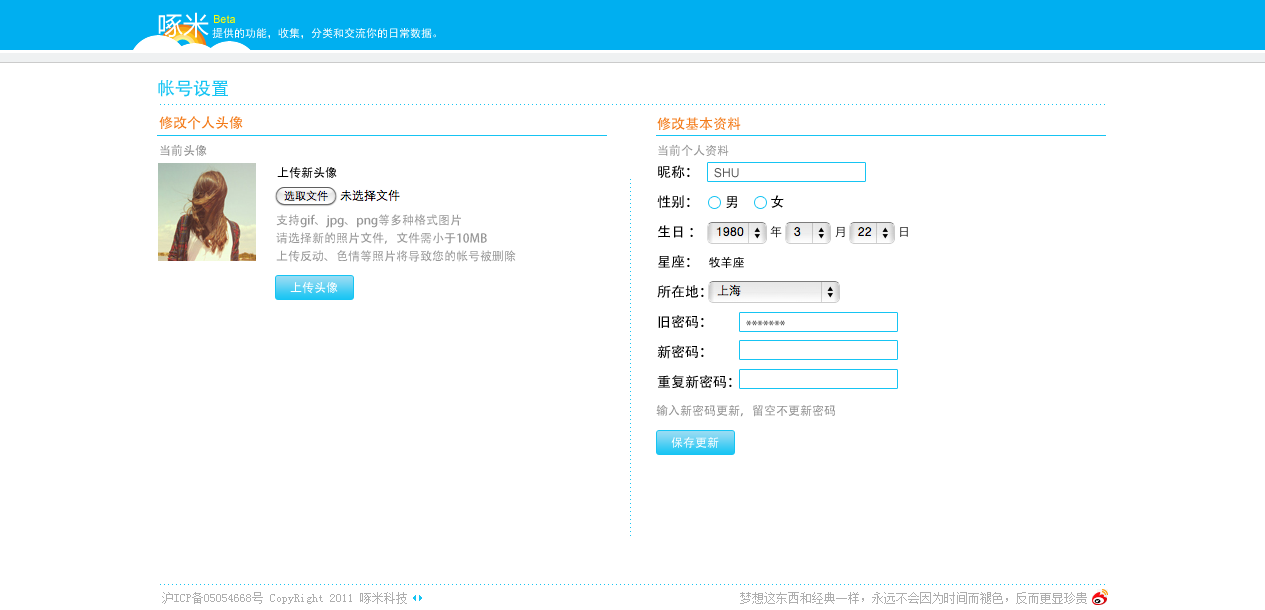
<style>
.page{position:relative;width:1265px;height:610px;background:#ffffff}
.page>*{position:absolute;margin:0}
.t1{font:26px "MicrosoftYaHei";color:#ffffff}
.t2{font:11px "ArialMT";color:#fffc04}
.t3{font:11px "SimHei";color:#ffffff}
.t4{font:18px "AdobeHeitiStd-Regular";color:#16c4f3}
.t5{font:14px "AdobeHeitiStd-Regular";color:#f37916}
.t6{font:12px "AdobeHeitiStd-Regular";color:#8e8e8e}
.t7{font:12px "AdobeHeitiStd-Regular";color:#959595}
.t8{font:12px "AdobeHeitiStd-Regular";color:#000000}
.t9{font:14px/30px "AdobeHeitiStd-Regular";color:#000000}
.t10{font:12px/30px "AdobeHeitiStd-Regular";color:#000000}
.t11{font:12px "ArialMT";color:#565656}
.t12{font:14px "AdobeHeitiStd-Regular";color:#000000}
.t13{font:12px/18px "AdobeHeitiStd-Regular";color:#979797}
.t14{font:12px "AdobeHeitiStd-Regular";color:#ffffff}
.t15{font:12px "AdobeHeitiStd-Regular"}
.t16{font:12px "AdobeHeitiStd-Regular";color:#909090}
.t17{font:12px "NSimSun";color:#aeaeae}
</style>
<div class="page">
<p class="t1" style="left:158px;top:12px;width:51px;height:26px">啄米</p>
<p class="t2" style="left:214px;top:15px;width:21px;height:8px">Beta</p>
<p class="t3" style="left:212px;top:28px;width:224px;height:11px">提供的功能，收集，分类和交流你的日常数据。</p>
<p class="t4" style="left:158px;top:80px;width:70px;height:17px">帐号设置</p>
<p class="t5" style="left:159px;top:116px;width:84px;height:14px">修改个人头像</p>
<p class="t5" style="left:657px;top:117px;width:84px;height:13px">修改基本资料</p>
<p class="t6" style="left:160px;top:144px;width:47px;height:12px">当前头像</p>
<p class="t7" style="left:658px;top:144px;width:71px;height:12px">当前个人资料</p>
<p class="t8" style="left:277px;top:167px;width:60px;height:12px">上传新头像</p>
<p class="t9" style="left:657px;top:165px;width:87px;height:133px">昵称：<br>性别：<br>生日 ：<br>星座：   <span class="t10">牧羊座</span><br>所在地：</p>
<p class="t11" style="left:714px;top:168px;width:25px;height:10px">SHU</p>
<p class="t12" style="left:726px;top:195px;width:58px;height:13px">男          女</p>
<p class="t13" style="left:276px;top:214px;width:240px;height:48px">支持gif、jpg、png等多种格式图片<br>请选择新的照片文件，文件需小于10MB<br>上传反动、色情等照片将导致您的帐号被删除</p>
<p class="t14" style="left:290px;top:282px;width:48px;height:12px">上传头像</p>
<p class="t9" style="left:657px;top:315px;width:75px;height:74px">旧密码：<br>新密码：<br>重复新密码：</p>
<p class="t15" style="left:746px;top:320px;width:39px;height:6px">*******</p>
<p class="t16" style="left:656px;top:404px;width:179px;height:13px">输入新密码更新，留空不更新密码</p>
<p class="t14" style="left:671px;top:437px;width:48px;height:11px">保存更新</p>
<p class="t17" style="left:162px;top:592px;width:245px;height:12px">沪ICP备05054668号 CopyRight 2011 啄米科技</p>
<p class="t17" style="left:740px;top:592px;width:347px;height:12px">梦想这东西和经典一样，永远不会因为时间而褪色，反而更显珍贵</p>
</div>
